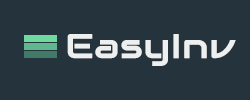
<style>
.page{position:relative;width:250px;height:100px;background:#25333c}
.page>*{position:absolute;margin:0}
.t1{font:33.7px "Audiowide-Regular";color:#eeefef;font-weight:bold;scale:1.11 1}
</style>
<div class="page">
<p class="t1" style="left:67px;top:34px;width:169px;height:32px">EasyInv</p>
</div>
